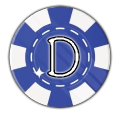
<style>
.page{position:relative;width:120px;height:114px;background:#ffffff}
.page>*{position:absolute;margin:0}
.t1{font:53.5px "DeliusUnicase-Regular"}
</style>
<div class="page">
<p class="t1" style="left:47px;top:36px;width:33px;height:42px">D</p>
</div>
